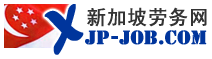
<style>
.page{position:relative;width:212px;height:59px;background:#ffffff}
.page>*{position:absolute;margin:0}
.t1{font:53.1px "ForteMT";color:#00359c;font-weight:bold;scale:0.97 1}
.t2{font:20px "SimHei";color:#333333;font-weight:bold}
.t3{font:18px "StencilStd";color:#00359c;font-weight:bold}
</style>
<div class="page">
<p class="t1" style="left:44px;top:4px;width:40px;height:51px;rotate:-22deg">X</p>
<p class="t2" style="left:87px;top:7px;width:120px;height:20px">新加坡劳务网</p>
<p class="t3" style="left:85px;top:30px;width:122px;height:15px">jp-job.com</p>
</div>
